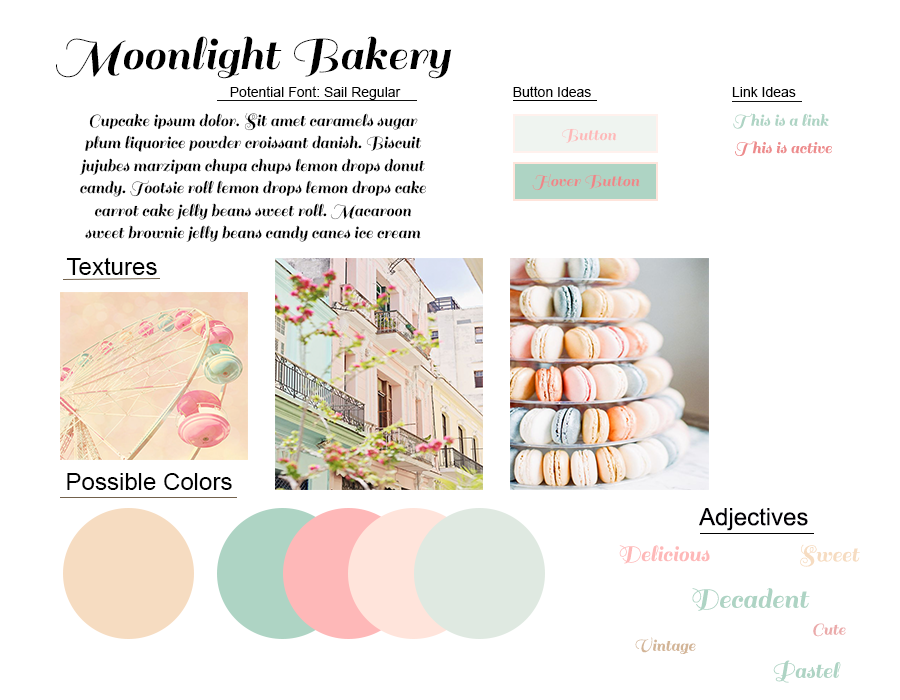
<style>
.page{position:relative;width:900px;height:700px;background:#ffffff}
.page>*{position:absolute;margin:0}
.t1{font:50px "Sail-Regular";color:#000000}
.t2{font:14px "ArialMT";color:#000000}
.t3{font:18.7px "Sail-Regular";color:#000000;scale:0.96 1}
.t4{font:18px "Sail-Regular";color:#aed4c4}
.t5{font:18px "Sail-Regular";color:#feb8b8}
.t6{font:18px "Sail-Regular";color:#ed8b8c}
.t7{font:18px "Sail-Regular";color:#ef8587}
.t8{font:24px "ArialMT";color:#000000}
.t9{font:24px "ArialMT";color:#020004}
.t10{font:24px "Sail-Regular";color:#feb8b8}
.t11{font:24px "Sail-Regular";color:#f6dcc1}
.t12{font:30px "Sail-Regular";color:#aed4c4}
.t13{font:18px "Sail-Regular";color:#ebabab}
.t14{font:18px "Sail-Regular";color:#d3b597}
.t15{font:24px "Sail-Regular";color:#aed4c4}
</style>
<div class="page">
<p class="t1" style="left:56px;top:36px;width:396px;height:43px">Moonlight Bakery</p>
<p class="t2" style="left:230px;top:86px;width:171px;height:14px">Potential Font: Sail Regular</p>
<p class="t2" style="left:513px;top:86px;width:78px;height:11px">Button Ideas</p>
<p class="t2" style="left:732px;top:87px;width:64px;height:10px">Link Ideas</p>
<p class="t3" style="left:79px;top:113px;width:347px;height:129px;text-align:center">Cupcake ipsum dolor. Sit amet caramels sugar plum liquorice powder croissant danish. Biscuit jujubes marzipan chupa chups lemon drops donut candy. Tootsie roll lemon drops lemon drops cake carrot cake jelly beans sweet roll. Macaroon sweet brownie jelly beans candy canes ice cream candy canes sugar plum cookie. Donut liquorice croissant.</p>
<p class="t4" style="left:733px;top:113px;width:96px;height:16px">This is a link</p>
<p class="t5" style="left:562px;top:128px;width:55px;height:15px">Button</p>
<p class="t6" style="left:735px;top:141px;width:97px;height:15px">This is active</p>
<p class="t7" style="left:532px;top:174px;width:108px;height:17px">Hover Button</p>
<p class="t8" style="left:66px;top:257px;width:91px;height:18px">Textures</p>
<p class="t8" style="left:67px;top:473px;width:165px;height:17px">Possible Colors</p>
<p class="t9" style="left:699px;top:508px;width:109px;height:23px">Adjectives</p>
<p class="t10" style="left:619px;top:545px;width:91px;height:19px">Delicious</p>
<p class="t11" style="left:800px;top:544px;width:60px;height:23px">Sweet</p>
<p class="t12" style="left:692px;top:588px;width:118px;height:23px">Decadent</p>
<p class="t13" style="left:813px;top:623px;width:33px;height:14px">Cute</p>
<p class="t14" style="left:635px;top:637px;width:61px;height:17px">Vintage</p>
<p class="t15" style="left:773px;top:660px;width:68px;height:23px">Pastel</p>
</div>
